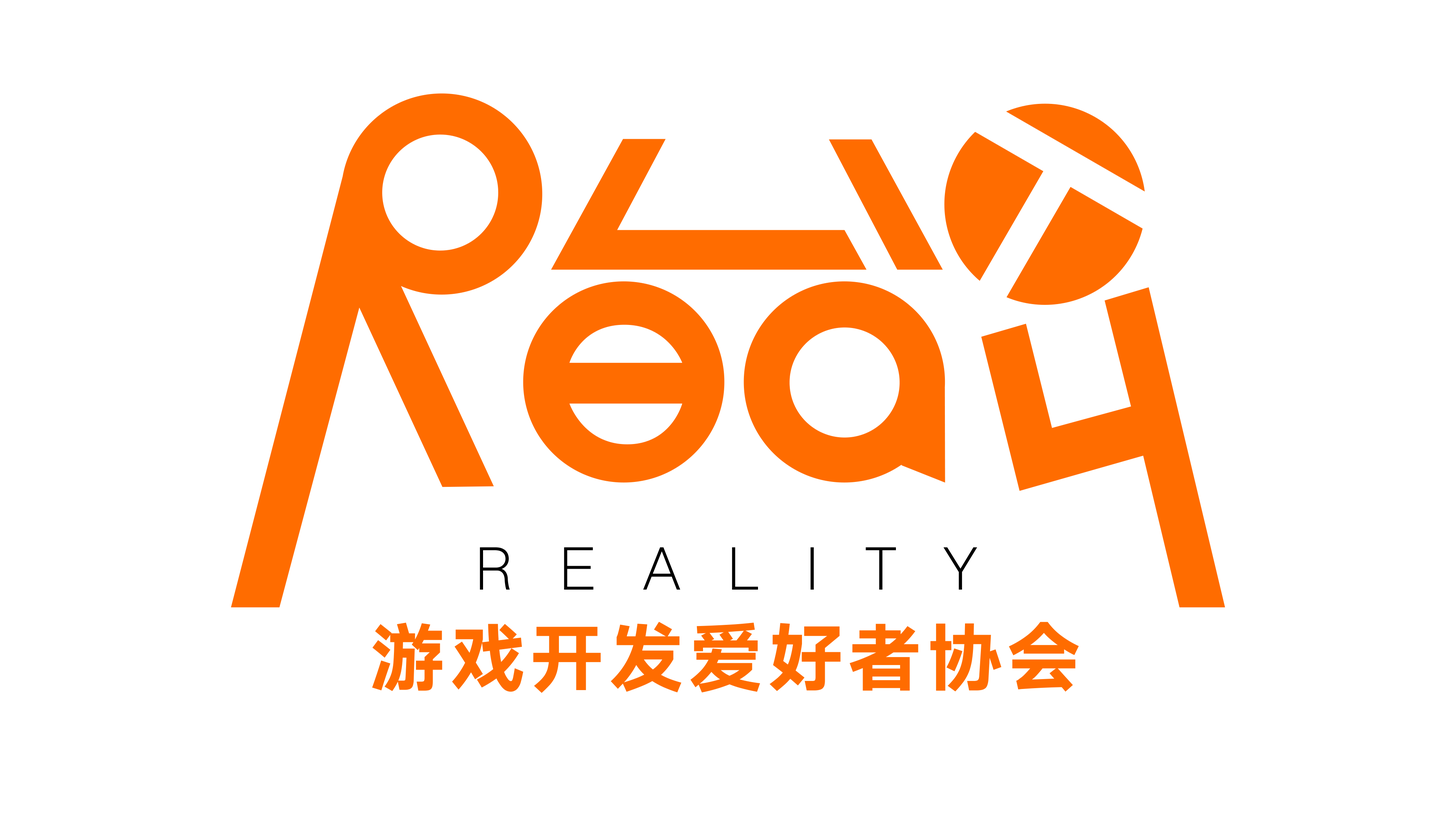
<style>
.page{position:relative;width:1456px;height:819px;background:#ffffff}
.page>*{position:absolute;margin:0}
.t1{font:75.7px/95.6px "HYQiHei-HES";letter-spacing:0.05em;color:#ff6c00}
.t2{font:58.7px/95.6px "HYQiHei-DZS";letter-spacing:0.79em;color:#000000}
</style>
<div class="page">
<p class="t1" style="left:372px;top:547px;width:707px;height:146px;text-align:center"><span class="t2">REALITY<br></span>游戏开发爱好者协会</p>
</div>
